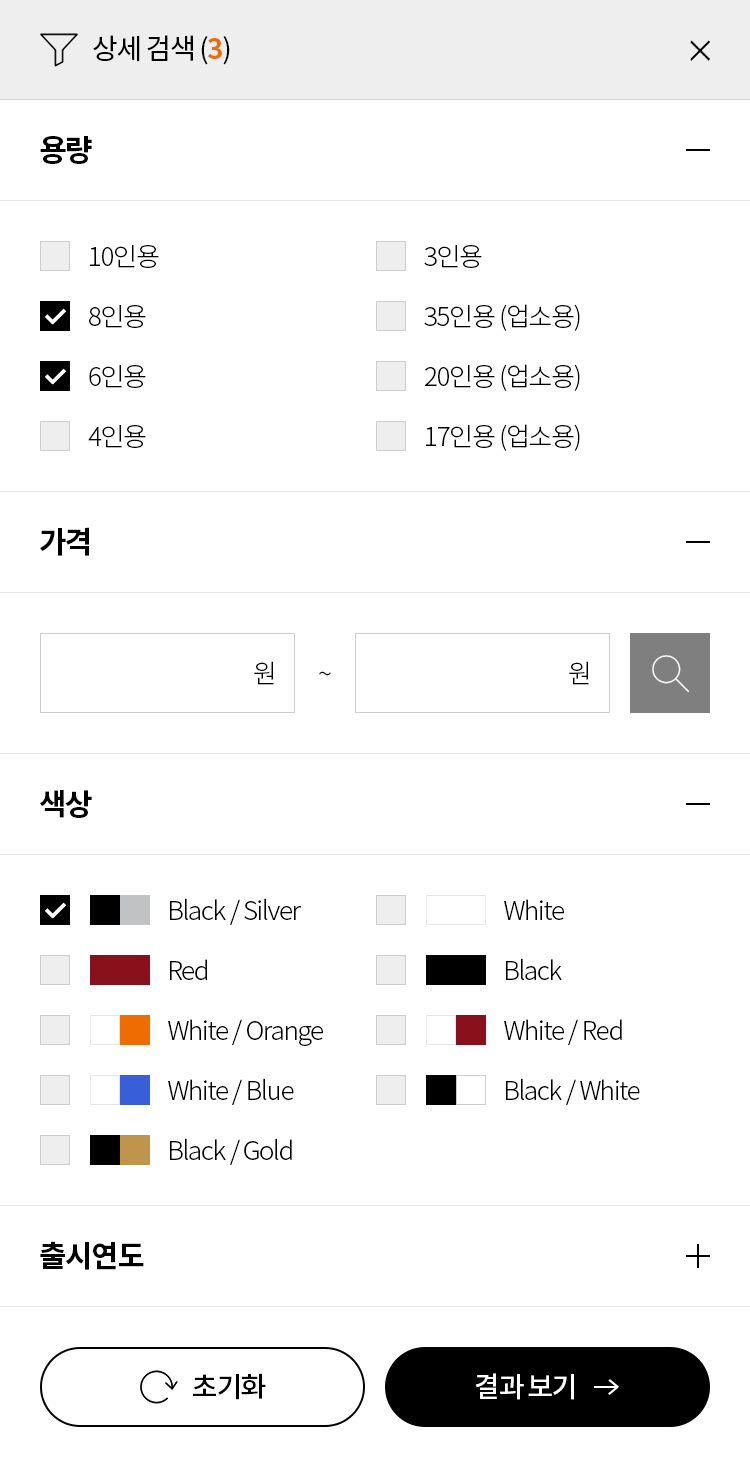
<style>
.page{position:relative;width:750px;height:1467px;background:#ffffff}
.page>*{position:absolute;margin:0}
.t1{font:28px "NotoSansCJKkr-Regular";letter-spacing:-0.05em;color:#000000}
.t2{font:28px "NotoSansCJKkr-Bold";letter-spacing:-0.05em;color:#ed6d00}
.t3{font:30px "NotoSansCJKkr-Bold";letter-spacing:-0.05em;color:#000000}
.t4{font:26px "NotoSansCJKkr-Light";letter-spacing:-0.05em;color:#000000}
.t5{font:28px "NotoSansCJKkr-Medium";letter-spacing:-0.05em;color:#000000}
.t6{font:28px "NotoSansCJKkr-Medium";letter-spacing:-0.05em;color:#ffffff}
</style>
<div class="page">
<p class="t1" style="left:93px;top:35px;width:137px;height:30px">상세 검색 (<span class="t2">3</span>)</p>
<p class="t3" style="left:40px;top:136px;width:52px;height:28px">용량</p>
<p class="t4" style="left:90px;top:245px;width:69px;height:23px">10인용</p>
<p class="t4" style="left:424px;top:245px;width:58px;height:23px">3인용</p>
<p class="t4" style="left:89px;top:305px;width:57px;height:23px">8인용</p>
<p class="t4" style="left:424px;top:304px;width:156px;height:27px">35인용 (업소용)</p>
<p class="t4" style="left:89px;top:365px;width:57px;height:23px">6인용</p>
<p class="t4" style="left:425px;top:364px;width:155px;height:27px">20인용 (업소용)</p>
<p class="t4" style="left:88px;top:425px;width:58px;height:23px">4인용</p>
<p class="t4" style="left:426px;top:424px;width:154px;height:27px">17인용 (업소용)</p>
<p class="t3" style="left:40px;top:527px;width:49px;height:29px">가격</p>
<p class="t4" style="left:254px;top:661px;width:20px;height:24px">원</p>
<p class="t4" style="left:569px;top:661px;width:20px;height:24px">원</p>
<p class="t4" style="left:319px;top:671px;width:12px;height:5px">~</p>
<p class="t3" style="left:40px;top:790px;width:52px;height:28px">색상</p>
<p class="t4" style="left:170px;top:898px;width:131px;height:27px">Black / Silver</p>
<p class="t4" style="left:504px;top:899px;width:60px;height:21px">White</p>
<p class="t4" style="left:170px;top:959px;width:37px;height:21px">Red</p>
<p class="t4" style="left:506px;top:958px;width:56px;height:22px">Black</p>
<p class="t4" style="left:168px;top:1019px;width:155px;height:27px">White / Orange</p>
<p class="t4" style="left:504px;top:1019px;width:118px;height:26px">White / Red</p>
<p class="t4" style="left:168px;top:1078px;width:126px;height:27px">White / Blue</p>
<p class="t4" style="left:506px;top:1078px;width:134px;height:27px">Black / White</p>
<p class="t4" style="left:170px;top:1138px;width:122px;height:27px">Black / Gold</p>
<p class="t3" style="left:40px;top:1241px;width:104px;height:29px">출시연도</p>
<p class="t5" style="left:193px;top:1373px;width:73px;height:27px">초기화</p>
<p class="t6" style="left:475px;top:1373px;width:99px;height:27px">결과 보기</p>
</div>
